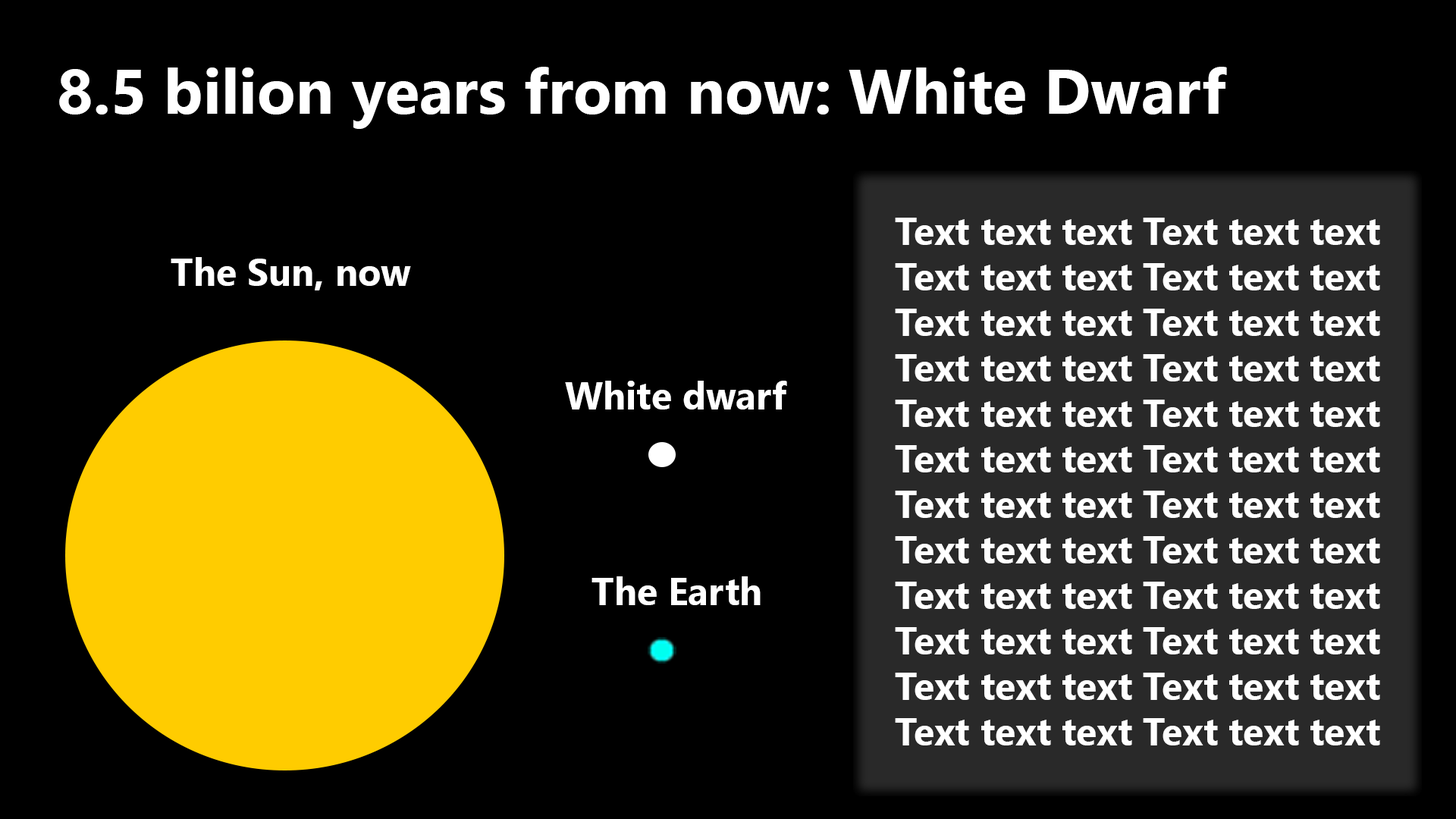
<style>
.page{position:relative;width:1456px;height:819px;background:#000000}
.page>*{position:absolute;margin:0}
.t1{font:63.2px "SegoeUI-Bold";color:#ffffff}
.t2{font:9.1px "SegoeUI-Bold";color:#ffffff}
</style>
<div class="page">
<p class="t1" style="left:59px;top:67px;width:1168px;height:62px">8.5 bilion years from now: White Dwarf</p>
<p class="t2" style="left:895px;top:218px;width:485px;height:527px">Text text text Text text text<br>Text text text Text text text<br>Text text text Text text text<br>Text text text Text text text<br>Text text text Text text text<br>Text text text Text text text<br>Text text text Text text text<br>Text text text Text text text<br>Text text text Text text text<br>Text text text Text text text<br>Text text text Text text text<br>Text text text Text text text</p>
<p class="t2" style="left:171px;top:257px;width:240px;height:33px">The Sun, now</p>
<p class="t2" style="left:565px;top:381px;width:222px;height:28px">White dwarf</p>
<p class="t2" style="left:591px;top:576px;width:170px;height:29px">The Earth</p>
</div>
